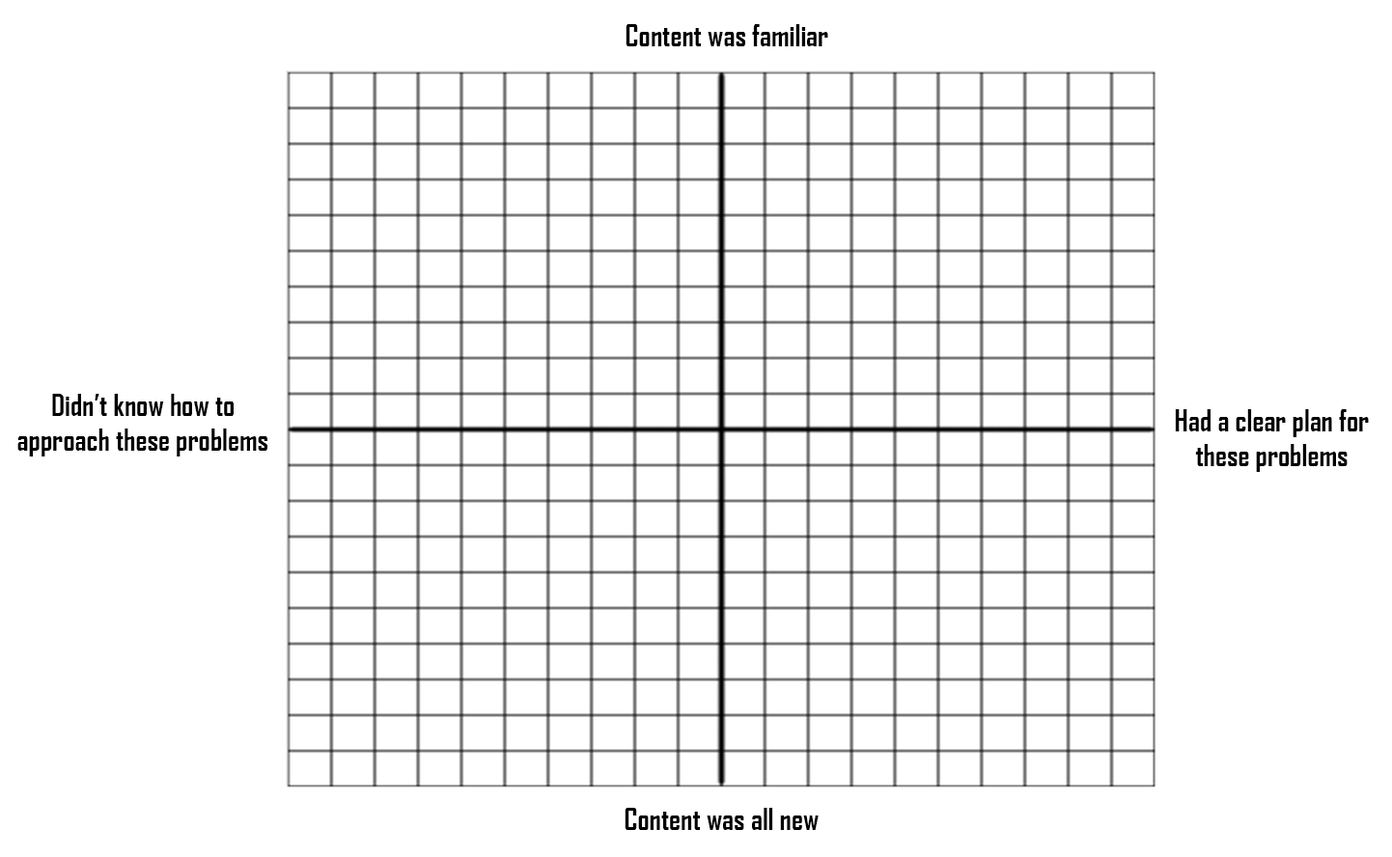
<style>
.page{position:relative;width:1392px;height:857px;background:#ffffff}
.page>*{position:absolute;margin:0}
.t1{font:29px "AgencyFB-Bold";color:#000000}
</style>
<div class="page">
<p class="t1" style="left:625px;top:24px;width:203px;height:22px">Content was familiar</p>
<p class="t1" style="left:17px;top:394px;width:250px;height:62px;text-align:center">Didn’t know how to approach these problems</p>
<p class="t1" style="left:1174px;top:409px;width:194px;height:63px;text-align:center">Had a clear plan for these problems</p>
<p class="t1" style="left:624px;top:808px;width:194px;height:22px">Content was all new</p>
</div>
